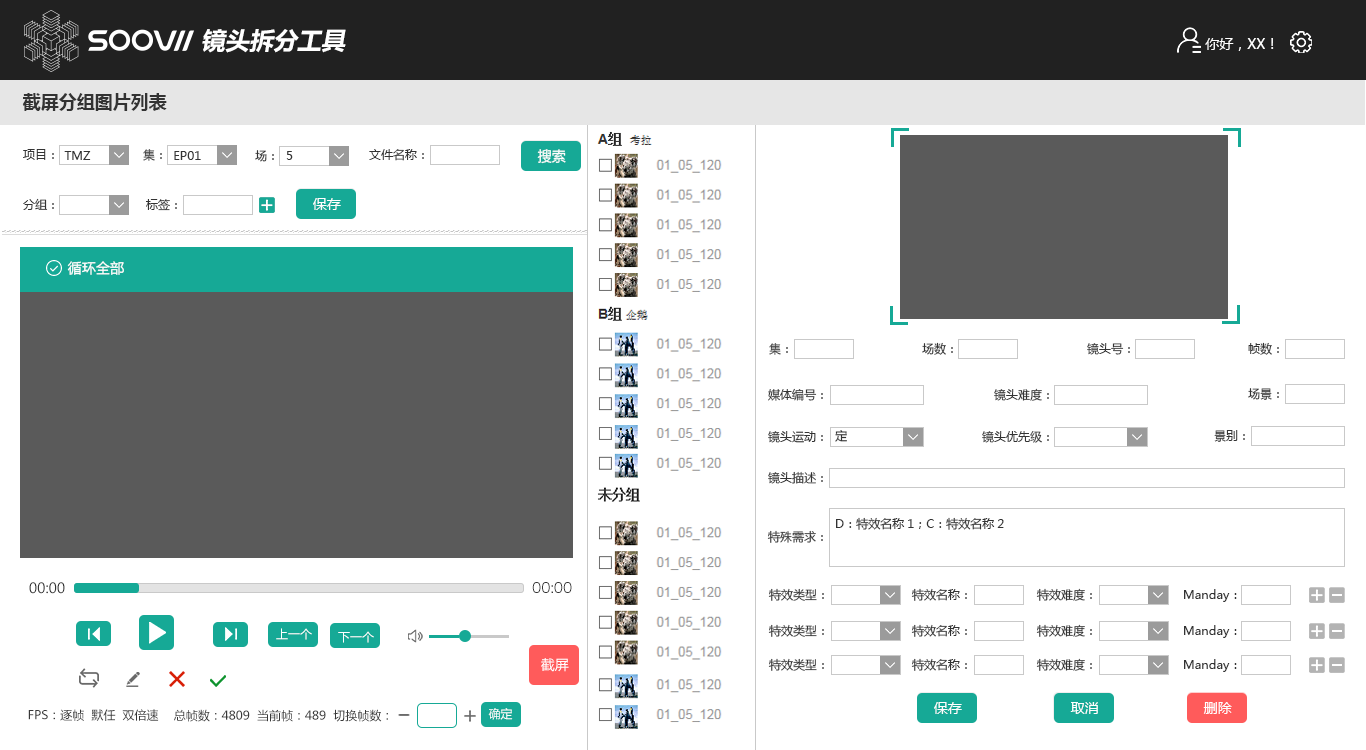
<style>
.page{position:relative;width:1366px;height:750px;background:#ffffff}
.page>*{position:absolute;margin:0}
.t1{font:24px "MicrosoftYaHei-Bold";color:#ffffff;font-style:italic}
.t2{font:14px "MicrosoftYaHei";color:#ffffff}
.t3{font:18px "MicrosoftYaHei-Bold";color:#333333}
.t4{font:12px "MicrosoftYaHei";color:#333333}
.t5{font:12px "MicrosoftYaHei"}
.t6{font:14px "MicrosoftYaHei";color:#333333}
.t7{font:14px "HiraginoSansGB-W3";color:#333333}
.t8{font:12px "MicrosoftYaHei";color:#ffffff}
.t9{font:12px "MicrosoftYaHei";color:#383838}
</style>
<div class="page">
<p class="t1" style="left:202px;top:29px;width:144px;height:24px">镜头拆分工具</p>
<p class="t2" style="left:1205px;top:38px;width:69px;height:13px">你好，XX！</p>
<p class="t3" style="left:22px;top:93px;width:145px;height:18px">截屏分组图片列表</p>
<p class="t4" style="left:23px;top:149px;width:31px;height:11px">项目：</p>
<p class="t5" style="left:143px;top:149px;width:19px;height:12px">集：</p>
<p class="t4" style="left:255px;top:150px;width:19px;height:12px">场：</p>
<p class="t4" style="left:369px;top:149px;width:55px;height:12px">文件名称：</p>
<p class="t2" style="left:537px;top:149px;width:29px;height:15px">搜索</p>
<p class="t4" style="left:64px;top:151px;width:27px;height:9px">TMZ</p>
<p class="t4" style="left:174px;top:151px;width:27px;height:9px">EP01</p>
<p class="t4" style="left:286px;top:151px;width:7px;height:9px">5</p>
<p class="t4" style="left:23px;top:198px;width:31px;height:12px">分组：</p>
<p class="t2" style="left:313px;top:198px;width:28px;height:12px">保存</p>
<p class="t4" style="left:146px;top:199px;width:31px;height:12px">标签：</p>
<p class="t2" style="left:67px;top:261px;width:57px;height:14px">循环全部</p>
<p class="t4" style="left:922px;top:342px;width:31px;height:13px">场数：</p>
<p class="t4" style="left:1248px;top:342px;width:31px;height:13px">帧数：</p>
<p class="t5" style="left:769px;top:343px;width:19px;height:12px">集：</p>
<p class="t4" style="left:1087px;top:343px;width:43px;height:12px">镜头号：</p>
<p class="t4" style="left:768px;top:388px;width:55px;height:13px">媒体编号：</p>
<p class="t4" style="left:994px;top:388px;width:55px;height:13px">镜头难度：</p>
<p class="t4" style="left:1248px;top:388px;width:31px;height:12px">场景：</p>
<p class="t4" style="left:768px;top:431px;width:55px;height:12px">镜头运动：</p>
<p class="t4" style="left:835px;top:430px;width:12px;height:12px">定</p>
<p class="t4" style="left:982px;top:431px;width:67px;height:12px">镜头优先级：</p>
<p class="t4" style="left:1214px;top:430px;width:31px;height:12px">景别：</p>
<p class="t4" style="left:768px;top:471px;width:55px;height:13px">镜头描述：</p>
<p class="t4" style="left:836px;top:517px;width:168px;height:13px">D：特效名称1；C：特效名称2</p>
<p class="t4" style="left:767px;top:530px;width:56px;height:13px">特殊需求：</p>
<p class="t6" style="left:29px;top:582px;width:36px;height:12px">00:00</p>
<p class="t7" style="left:532px;top:582px;width:40px;height:11px">00:00</p>
<p class="t4" style="left:768px;top:588px;width:56px;height:13px">特效类型：</p>
<p class="t4" style="left:911px;top:588px;width:56px;height:13px">特效名称：</p>
<p class="t4" style="left:1036px;top:588px;width:56px;height:13px">特效难度：</p>
<p class="t4" style="left:1184px;top:589px;width:53px;height:13px">Manday：</p>
<p class="t8" style="left:276px;top:628px;width:36px;height:12px">上一个</p>
<p class="t4" style="left:768px;top:624px;width:56px;height:13px">特效类型：</p>
<p class="t4" style="left:911px;top:624px;width:56px;height:13px">特效名称：</p>
<p class="t4" style="left:1036px;top:624px;width:56px;height:13px">特效难度：</p>
<p class="t4" style="left:1184px;top:625px;width:53px;height:13px">Manday：</p>
<p class="t8" style="left:338px;top:631px;width:36px;height:12px">下一个</p>
<p class="t8" style="left:338px;top:631px;width:36px;height:12px">下一个</p>
<p class="t2" style="left:541px;top:658px;width:28px;height:14px">截屏</p>
<p class="t2" style="left:541px;top:658px;width:28px;height:14px">截屏</p>
<p class="t4" style="left:768px;top:658px;width:56px;height:13px">特效类型：</p>
<p class="t4" style="left:911px;top:658px;width:56px;height:13px">特效名称：</p>
<p class="t4" style="left:1036px;top:658px;width:56px;height:13px">特效难度：</p>
<p class="t4" style="left:1184px;top:659px;width:53px;height:13px">Manday：</p>
<p class="t2" style="left:934px;top:702px;width:28px;height:12px">保存</p>
<p class="t2" style="left:1070px;top:702px;width:28px;height:12px">取消</p>
<p class="t2" style="left:1203px;top:702px;width:29px;height:12px">删除</p>
<p class="t9" style="left:28px;top:709px;width:131px;height:12px">FPS：逐帧  默任  双倍速</p>
<p class="t9" style="left:174px;top:709px;width:214px;height:13px">总帧数：4809  当前帧：489  切换帧数：</p>
<p class="t8" style="left:488px;top:708px;width:25px;height:12px">确定</p>
<p class="t8" style="left:488px;top:708px;width:25px;height:12px">确定</p>
</div>
